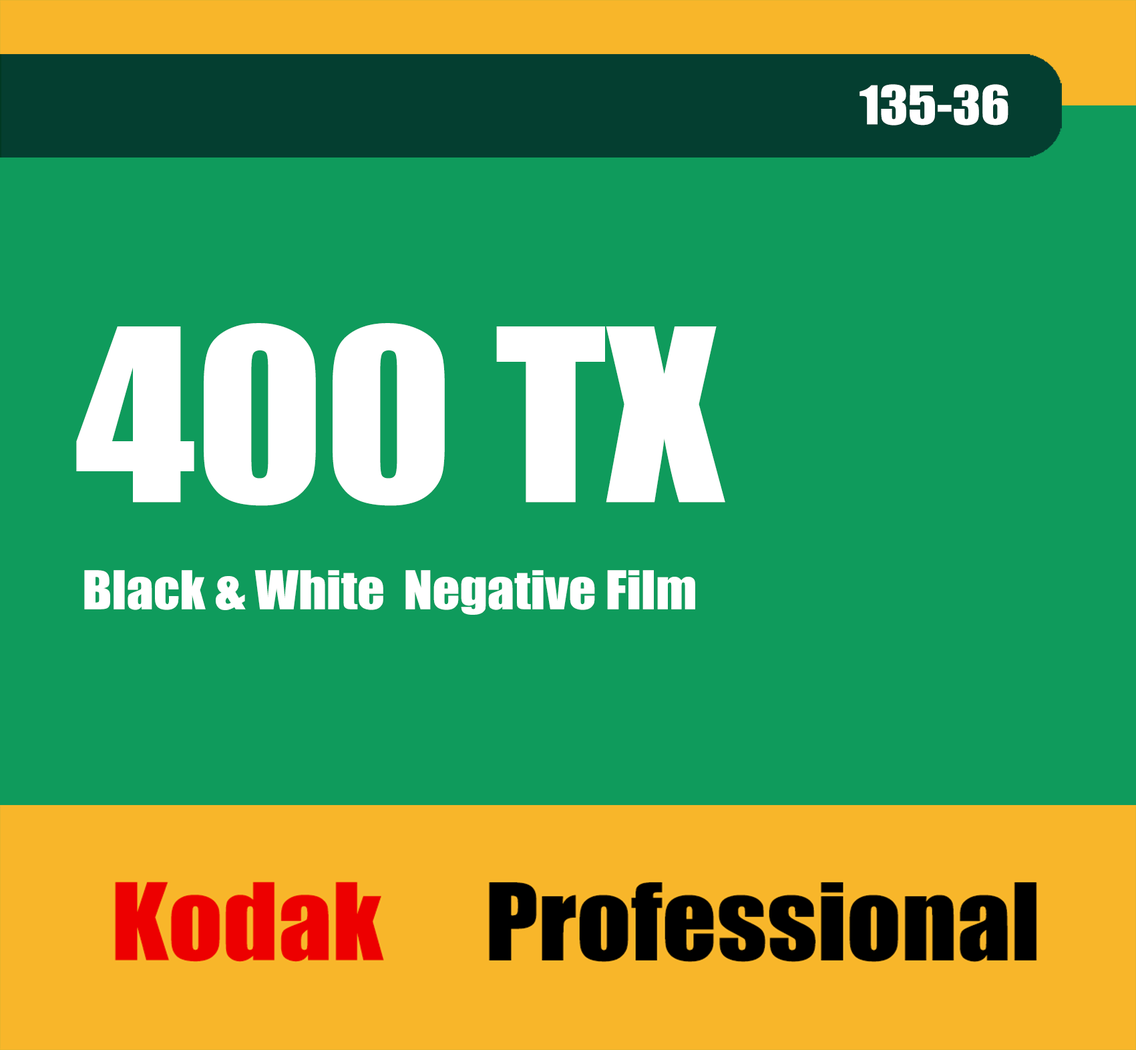
<style>
.page{position:relative;width:1136px;height:1050px;background:#0f9b5c}
.page>*{position:absolute;margin:0}
.t1{font:49.4px "Impact";color:#ffffff;scale:1.08 1}
.t2{font:222.2px "Impact";color:#ffffff;scale:1.08 1}
</style>
<div class="page">
<p class="t1" style="left:859px;top:84px;width:149px;height:42px">135-36</p>
<p class="t2" style="left:76px;top:323px;width:649px;height:183px">400 TX</p>
<p class="t1" style="left:84px;top:570px;width:611px;height:45px">Black &amp; White  Negative Film</p>
</div>
